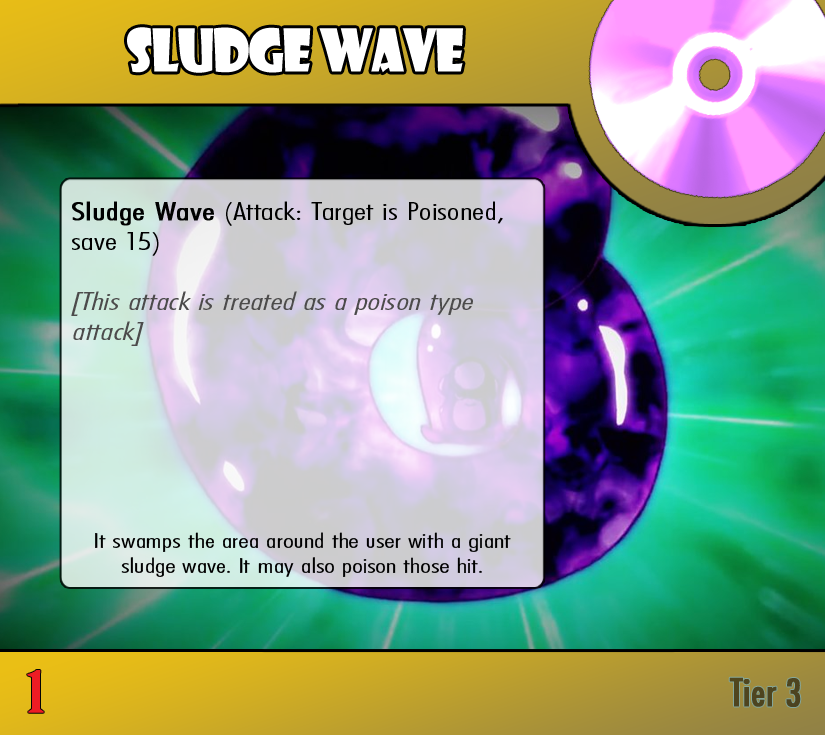
<style>
.page{position:relative;width:825px;height:735px}
.page>*{position:absolute;margin:0}
.t1{font:57.4px "ShowcardGothic-Reg";letter-spacing:-0.025em;color:#ffffff;scale:0.91 1}
.t2{font:25px "FuturaCondensedBQ-Light";color:#4c4b4b;font-style:italic;scale:1.5 1}
.t3{font:25px "FuturaCondensedBQ-Light";color:#000000;font-weight:bold;scale:1.5 1}
.t4{font:25px "FuturaCondensedBQ-Light";color:#000000;scale:1.5 1}
.t5{font:20.8px "FuturaCondensedBQ-Light";color:#000000;scale:1.5 1}
.t6{font:55.6px "BirchStd";color:#ed1c24;font-weight:bold;scale:1.5 1}
.t7{font:37.5px "Futura-Condensed-Normal";color:#4e451f;font-weight:bold}
</style>
<div class="page">
<p class="t1" style="left:127px;top:27px;width:336px;height:46px">Sludge Wave</p>
<p class="t2" style="left:71px;top:201px;width:432px;height:145px"><span class="t3">Sludge Wave </span><span class="t4">(Attack: Target is Poisoned, save 15)<br><br></span>[This attack is treated as a poison type attack]</p>
<p class="t5" style="left:95px;top:532px;width:416px;height:45px;text-align:center">It swamps the area around the user with a giant sludge wave. It may also poison those hit.</p>
<p class="t6" style="left:27px;top:670px;width:17px;height:43px">1</p>
<p class="t7" style="left:729px;top:677px;width:72px;height:30px">Tier 3</p>
</div>
